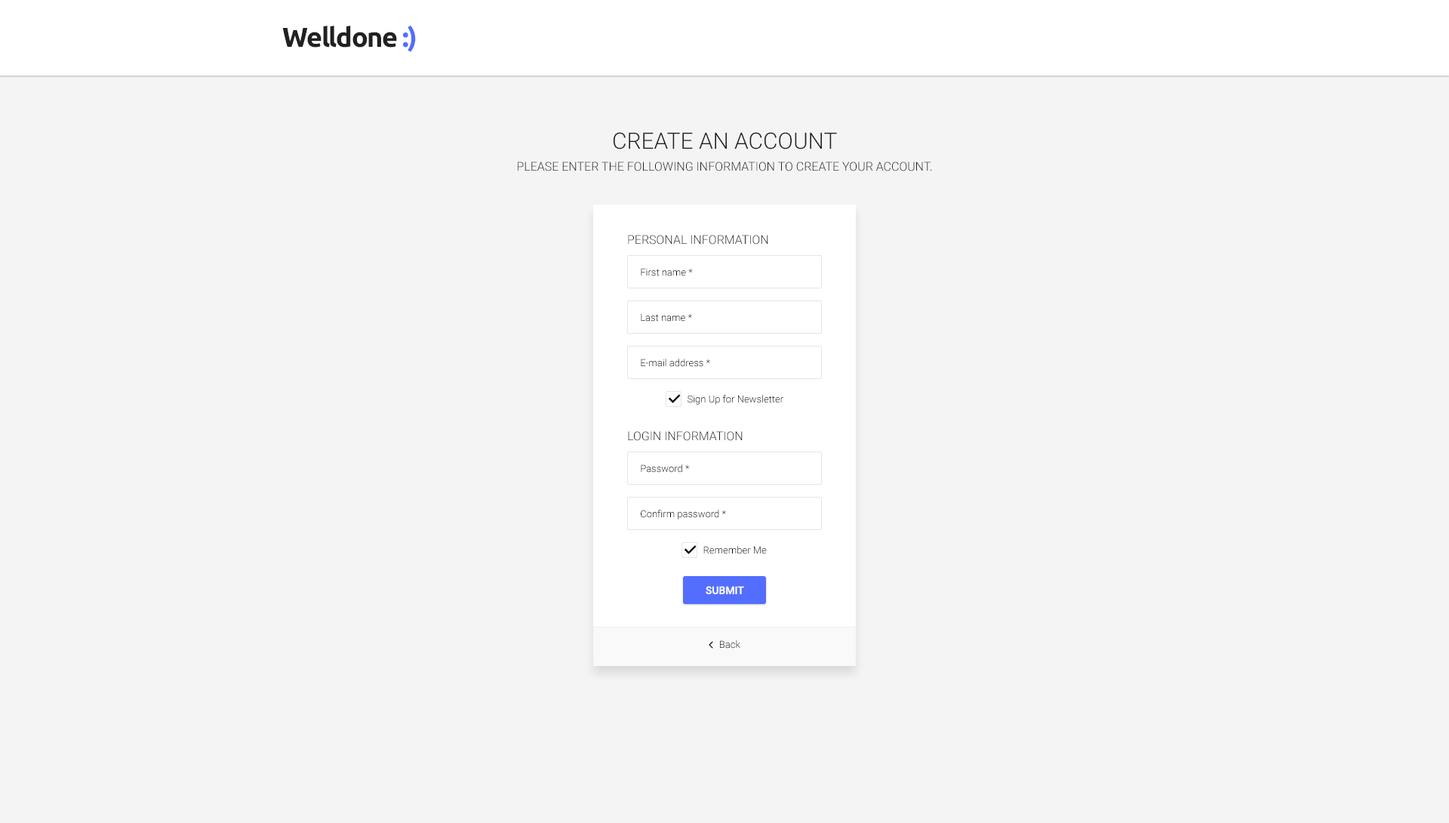
<style>
.page{position:relative;width:1449px;height:823px;background:#f4f4f4}
.page>*{position:absolute;margin:0}
.t1{font:27.2px "Ubuntu-Bold";letter-spacing:-0.04em;color:#212121}
.t2{font:27.2px "Ubuntu-Bold";letter-spacing:-0.04em;color:#536dfe}
.t3{font:22.6px "Roboto-Light";color:#212121;text-transform:uppercase}
.t4{font:12.1px "Roboto-Light";color:#212121;text-transform:uppercase}
.t5{font:9.8px "Roboto-Light";color:#000000}
.t6{font:9.8px "Roboto-Light"}
.t7{font:10.6px "Roboto-Medium";color:#ffffff;text-transform:uppercase}
</style>
<div class="page">
<p class="t1" style="left:282px;top:25px;width:134px;height:27px">Welldone <span class="t2">:)</span></p>
<p class="t3" style="left:614px;top:132px;width:223px;height:17px">Create an Account</p>
<p class="t4" style="left:518px;top:162px;width:414px;height:9px">Please enter the following information to create your account.</p>
<p class="t4" style="left:628px;top:235px;width:140px;height:10px">Personal Information</p>
<p class="t5" style="left:641px;top:268px;width:52px;height:8px">First name *</p>
<p class="t5" style="left:641px;top:313px;width:51px;height:9px">Last name *</p>
<p class="t5" style="left:641px;top:359px;width:69px;height:8px">E-mail address *</p>
<p class="t5" style="left:688px;top:395px;width:96px;height:10px">Sign Up for Newsletter</p>
<p class="t4" style="left:628px;top:431px;width:115px;height:10px">Login Information</p>
<p class="t6" style="left:641px;top:464px;width:49px;height:9px">Password *</p>
<p class="t5" style="left:641px;top:510px;width:85px;height:9px">Confirm password *</p>
<p class="t5" style="left:704px;top:546px;width:63px;height:8px">Remember Me</p>
<p class="t7" style="left:706px;top:586px;width:38px;height:8px">submit</p>
</div>
